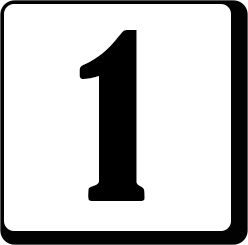
<style>
.page{position:relative;width:248px;height:245px;background:#ffffff}
.page>*{position:absolute;margin:0}
.t1{font:216px "BernardMT-Condensed";color:#010000}
</style>
<div class="page">
<p class="t1" style="left:79px;top:30px;width:66px;height:171px">1</p>
</div>
